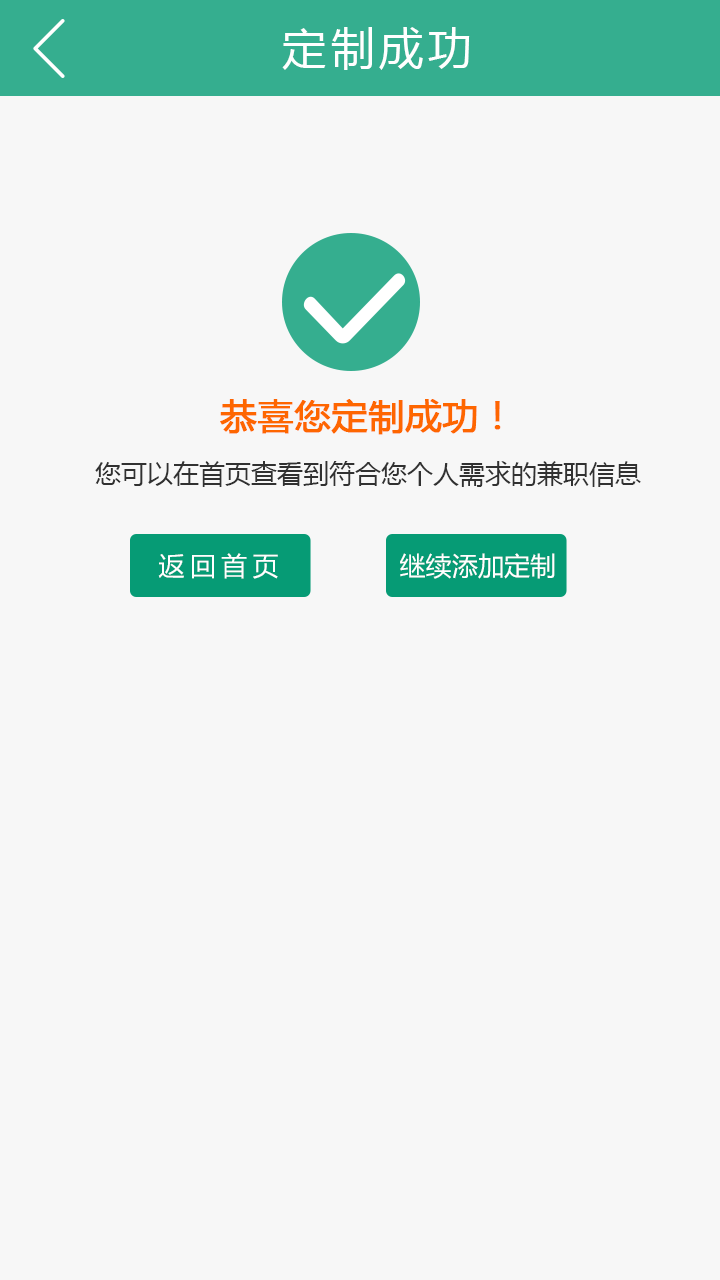
<style>
.page{position:relative;width:720px;height:1280px;background:#f7f7f7}
.page>*{position:absolute;margin:0}
.t1{font:44px "MicrosoftYaHei";letter-spacing:0.1em;color:#ffffff}
.t2{font:26px "MicrosoftYaHei";color:#313131}
.t3{font:36px "MicrosoftYaHei";color:#fe6600;font-weight:bold}
.t4{font:26px "MicrosoftYaHei";letter-spacing:0.2em;color:#ffffff}
.t5{font:26px "MicrosoftYaHei";color:#ffffff}
</style>
<div class="page">
<p class="t1" style="left:282px;top:27px;width:188px;height:43px">定制成功</p>
<p class="t2" style="left:95px;top:399px;width:546px;height:88px;text-align:center"><span class="t3">恭喜您定制成功！<br></span>您可以在首页查看到符合您个人需求的兼职信息</p>
<p class="t4" style="left:158px;top:553px;width:120px;height:26px">返回首页</p>
<p class="t5" style="left:400px;top:553px;width:155px;height:26px">继续添加定制</p>
</div>
